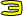
<style>
.page{position:relative;width:23px;height:16px;background:#fcff00}
.page>*{position:absolute;margin:0}
.t1{font:25px "ThundergodII";color:#fcff00}
</style>
<div class="page">
<p class="t1" style="left:1px;top:1px;width:21px;height:14px">3</p>
</div>
